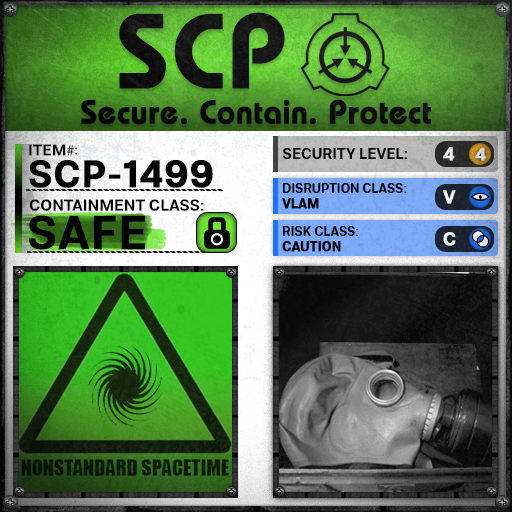
<style>
.page{position:relative;width:512px;height:512px}
.page>*{position:absolute;margin:0}
.t1{font:105.8px "BauhausLT-Demi";color:#000000;font-weight:bold}
.t2{font:33px "BauhausLT-Demi";color:#000000;font-weight:bold}
.t3{font:15.7px "Molde-Semibold";color:#000000}
.t4{font:15.7px "MyriadPro-Regular";color:#000000}
.t5{font:13.7px "Molde-Semibold";color:#000000}
.t6{font:15px "Molde-Semibold";color:#000000}
.t7{font:18.6px "Molde-Semibold";color:#ffffff;font-weight:bold}
.t8{font:17.8px "Molde-Semibold";color:#d5d6d6;font-weight:bold}
.t9{font:38.2px "Molde-Semibold";color:#000000;font-weight:bold}
.t10{font:12.8px "Molde-Semibold";color:#000000}
.t11{font:12.8px "Molde-Semibold";color:#000000;font-weight:bold}
.t12{font:15.9px "Molde-Semibold";color:#000000}
.t13{font:47.2px "Molde-Semibold";color:#000000;font-weight:bold}
</style>
<div class="page">
<p class="t1" style="left:119px;top:12px;width:166px;height:77px">SCP</p>
<p class="t2" style="left:81px;top:99px;width:350px;height:26px">Secure. Contain. Protect</p>
<p class="t3" style="left:29px;top:144px;width:45px;height:12px">ITEM<span class="t4">#</span></p>
<p class="t5" style="left:75px;top:147px;width:2px;height:8px">:</p>
<p class="t6" style="left:283px;top:148px;width:124px;height:11px">SECURITY LEVEL:</p>
<p class="t7" style="left:443px;top:147px;width:12px;height:14px">4</p>
<p class="t8" style="left:475px;top:147px;width:11px;height:14px">4</p>
<p class="t9" style="left:29px;top:160px;width:184px;height:28px">SCP-1499</p>
<p class="t10" style="left:282px;top:183px;width:125px;height:26px">DISRUPTION CLASS:<br><span class="t11">VLAM</span></p>
<p class="t7" style="left:443px;top:190px;width:13px;height:14px">V</p>
<p class="t12" style="left:29px;top:199px;width:175px;height:12px">CONTAINMENT CLASS:</p>
<p class="t13" style="left:28px;top:215px;width:118px;height:35px">SAFE</p>
<p class="t10" style="left:282px;top:226px;width:76px;height:26px">RISK CLASS:<br><span class="t11">CAUTION</span></p>
<p class="t7" style="left:443px;top:232px;width:13px;height:14px">C</p>
</div>
